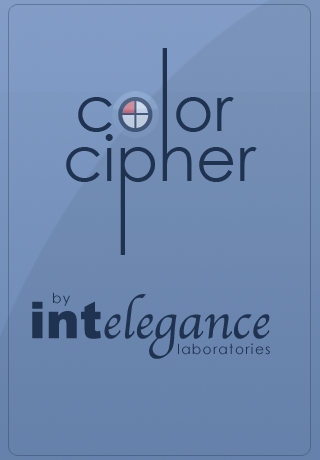
<style>
.page{position:relative;width:320px;height:460px}
.page>*{position:absolute;margin:0}
.t1{font:62.4px "CenturyGothic";color:#1f3250}
.t2{font:50.7px "Apple-Chancery";color:#1f3250}
.t3{font:50.7px "Arial-Black";color:#1f3250}
.t4{font:13.7px "CenturyGothic";letter-spacing:0.1em;color:#1f3250}
</style>
<div class="page">
<p class="t1" style="left:78px;top:97px;width:156px;height:35px">co or</p>
<p class="t1" style="left:66px;top:134px;width:191px;height:59px">cipher</p>
<p class="t2" style="left:32px;top:294px;width:238px;height:65px"><span class="t3">int</span>elegance</p>
<p class="t4" style="left:53px;top:292px;width:17px;height:14px">by</p>
<p class="t4" style="left:178px;top:343px;width:92px;height:12px">laboratories</p>
</div>
